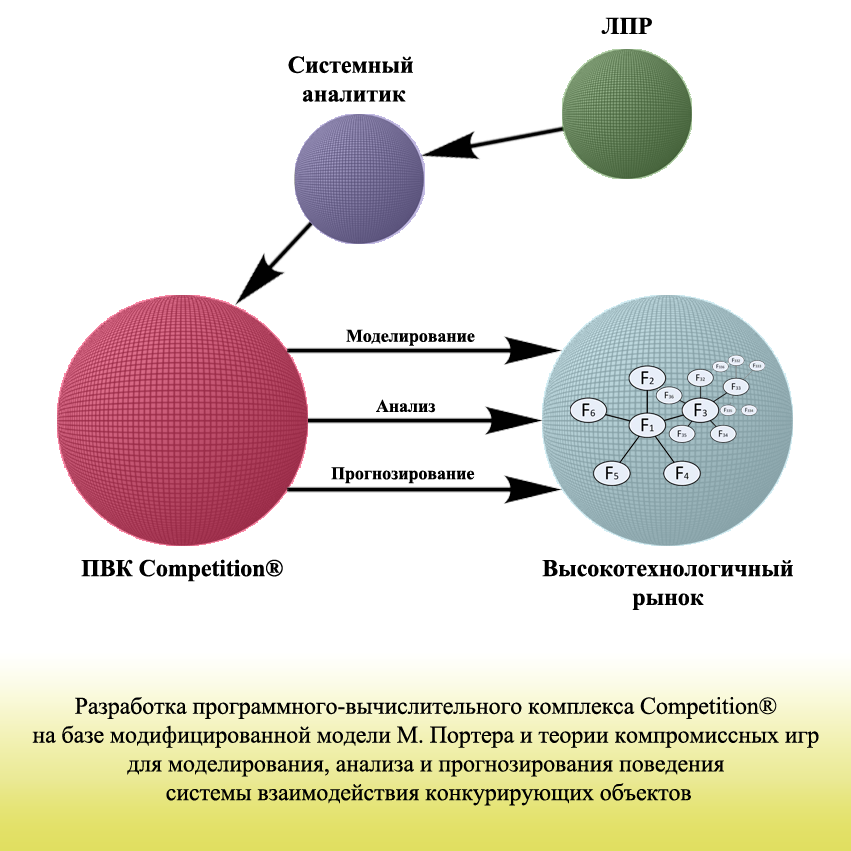
<style>
.page{position:relative;width:851px;height:851px;background:#ffffff}
.page>*{position:absolute;margin:0}
.t1{font:24px "TimesNewRomanPS-BoldMT";letter-spacing:-0.005em;color:#000000}
.t2{font:18px "TimesNewRomanPS-BoldMT";letter-spacing:-0.005em;color:#000000}
.t3{font:24px "TimesNewRomanPSMT";letter-spacing:-0.005em;color:#000000}
</style>
<div class="page">
<p class="t1" style="left:601px;top:17px;width:51px;height:17px">ЛПР</p>
<p class="t1" style="left:288px;top:56px;width:125px;height:46px;text-align:center">Системный <br>аналитик</p>
<p class="t2" style="left:346px;top:329px;width:129px;height:17px">Моделирование</p>
<p class="t2" style="left:376px;top:399px;width:60px;height:14px">Анализ</p>
<p class="t2" style="left:331px;top:467px;width:144px;height:17px">Прогнозирование</p>
<p class="t1" style="left:81px;top:559px;width:202px;height:23px">ПВК Competition®</p>
<p class="t1" style="left:542px;top:560px;width:251px;height:50px;text-align:center">Высокотехнологичный<br>рынок</p>
<p class="t3" style="left:32px;top:697px;width:787px;height:109px;text-align:center">Разработка программного-вычислительного комплекса Competition® <br>на базе модифицированной модели М. Портера и теории компромиссных игр <br>для моделирования, анализа и прогнозирования поведения <br>системы взаимодействия конкурирующих объектов</p>
</div>
